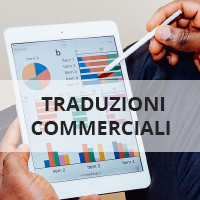
<style>
.page{position:relative;width:200px;height:200px}
.page>*{position:absolute;margin:0}
.t1{font:20px "OpenSans-Bold";letter-spacing:-0.005em;color:#242323;text-transform:uppercase}
</style>
<div class="page">
<p class="t1" style="left:31px;top:97px;width:139px;height:38px;text-align:center">Traduzioni <br>Commerciali</p>
</div>
